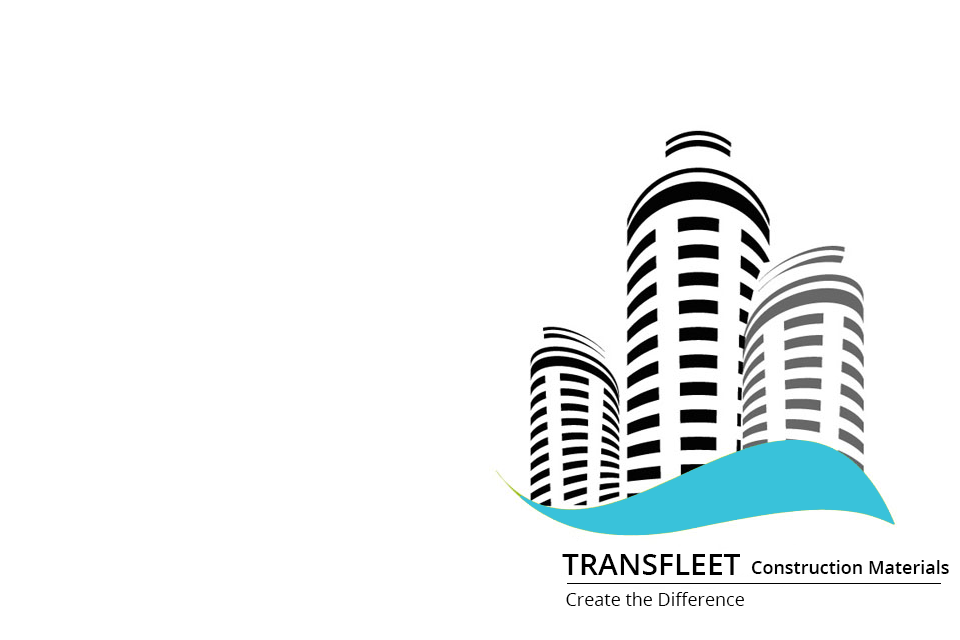
<style>
.page{position:relative;width:960px;height:640px;background:#ffffff}
.page>*{position:absolute;margin:0}
.t1{font:30px "OpenSans-Semibold";color:#000000}
.t2{font:18px "OpenSans-Semibold";color:#000000}
.t3{font:18px "OpenSans";color:#000000}
</style>
<div class="page">
<p class="t1" style="left:562px;top:554px;width:178px;height:21px">TRANSFLEET</p>
<p class="t2" style="left:751px;top:560px;width:198px;height:14px">Construction Materials</p>
<p class="t3" style="left:566px;top:592px;width:178px;height:14px">Create the Difference</p>
</div>
